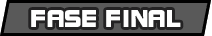
<style>
.page{position:relative;width:212px;height:36px;background:#595959}
.page>*{position:absolute;margin:0}
.t1{font:26.7px "DFSoGeiStd-W9";color:#ffffff;scale:0.9 1}
</style>
<div class="page">
<p class="t1" style="left:31px;top:10px;width:150px;height:17px">FASE FINAL</p>
</div>
